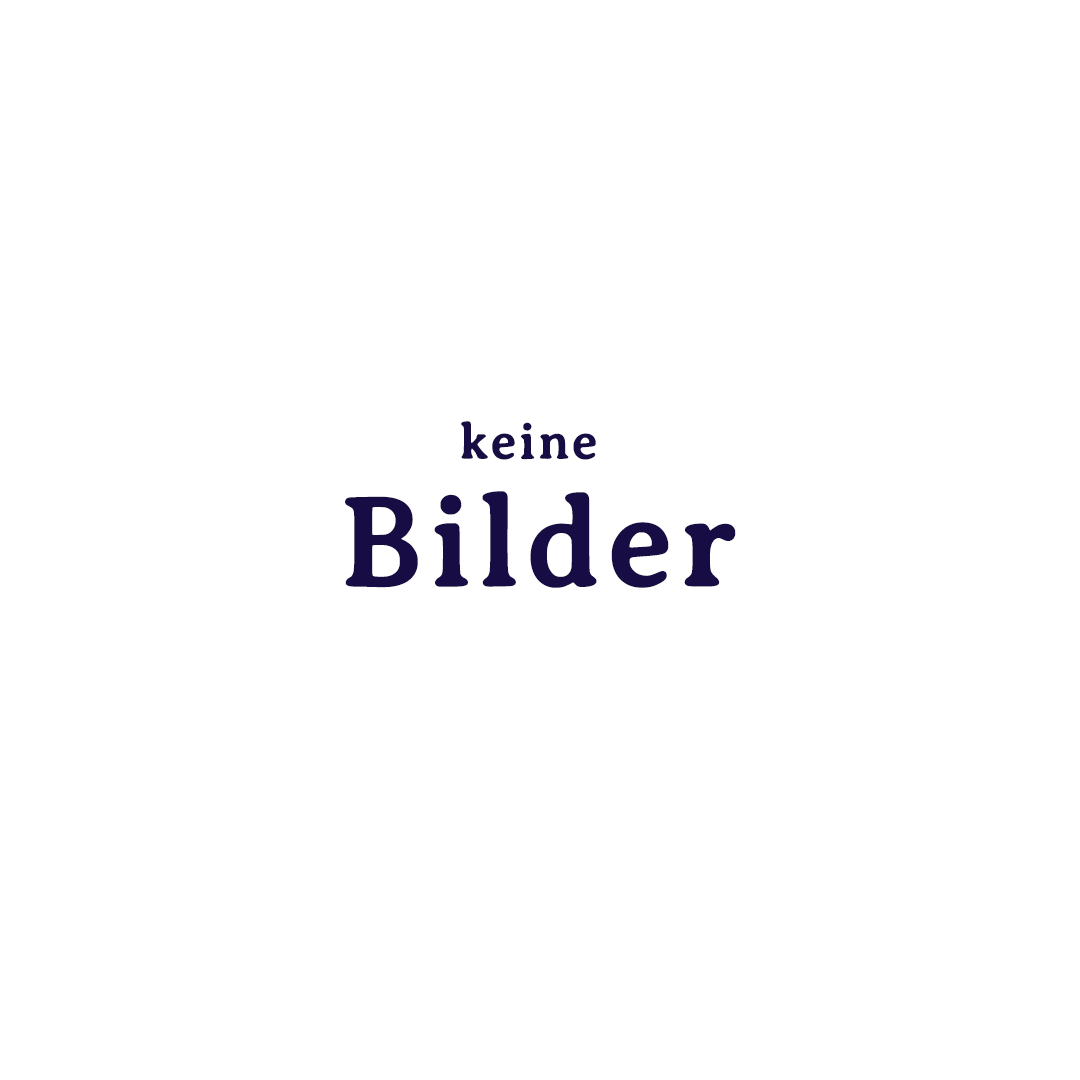
<style>
.page{position:relative;width:1080px;height:1080px;background:#ffffff}
.page>*{position:absolute;margin:0}
.t1{font:50px "AveriaSerifLibre-Regular";letter-spacing:0.04em;color:#180c44;font-weight:bold}
.t2{font:127px "AveriaSerifLibre-Regular";letter-spacing:0.04em;color:#180c44;font-weight:bold}
</style>
<div class="page">
<p class="t1" style="left:461px;top:421px;width:135px;height:39px">keine</p>
<p class="t2" style="left:345px;top:491px;width:391px;height:97px">Bilder</p>
</div>
